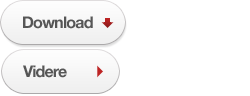
<style>
.page{position:relative;width:250px;height:96px;background:#ffffff}
.page>*{position:absolute;margin:0}
.t1{font:16px "HelveticaNeueLTStd-Bd";letter-spacing:-0.05em;color:#565656}
</style>
<div class="page">
<p class="t1" style="left:23px;top:16px;width:70px;height:13px">Download</p>
<p class="t1" style="left:23px;top:65px;width:44px;height:13px">Videre</p>
</div>
